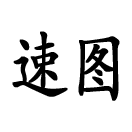
<style>
.page{position:relative;width:132px;height:132px;background:#ffffff}
.page>*{position:absolute;margin:0}
.t1{font:76px "AdobeKaitiStd-Regular";letter-spacing:0.025em;color:#000000;font-weight:bold;scale:0.76 1}
</style>
<div class="page">
<p class="t1" style="left:12px;top:31px;width:108px;height:70px">速图</p>
</div>
